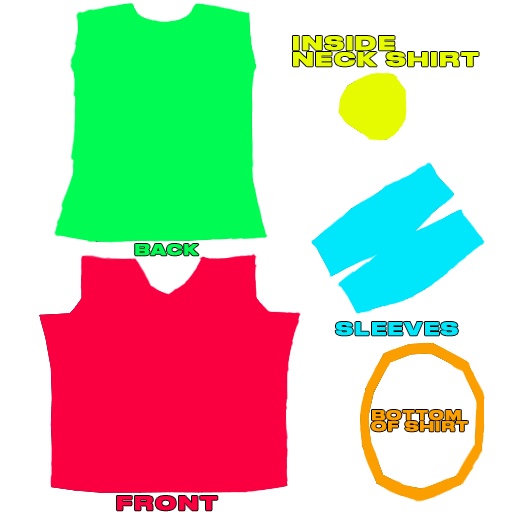
<style>
.page{position:relative;width:512px;height:512px;background:#ffffff}
.page>*{position:absolute;margin:0}
.t1{font:18.3px/16.1px "DrukWide-Bold";letter-spacing:0.1em;color:#e6fb00;text-transform:uppercase;font-weight:bold}
.t2{font:13.7px "DrukWide-Bold";letter-spacing:0.1em;color:#00fb53;text-transform:uppercase;font-weight:bold}
.t3{font:16.2px "DrukWide-Bold";letter-spacing:0.1em;color:#00e6fb;text-transform:uppercase;font-weight:bold}
.t4{font:12.4px/10.9px "DrukWide-Bold";letter-spacing:0.1em;color:#fb9f00;text-transform:uppercase;font-weight:bold}
.t5{font:17.6px "DrukWide-Bold";letter-spacing:0.1em;color:#fb0041;text-transform:uppercase;font-weight:bold}
</style>
<div class="page">
<p class="t1" style="left:293px;top:36px;width:186px;height:31px">Inside <br>Neck Shirt</p>
<p class="t2" style="left:135px;top:244px;width:64px;height:12px">back</p>
<p class="t3" style="left:335px;top:322px;width:123px;height:14px">sleeves</p>
<p class="t4" style="left:371px;top:410px;width:97px;height:22px">Bottom<br>of Shirt</p>
<p class="t5" style="left:117px;top:496px;width:101px;height:15px">Front</p>
</div>
